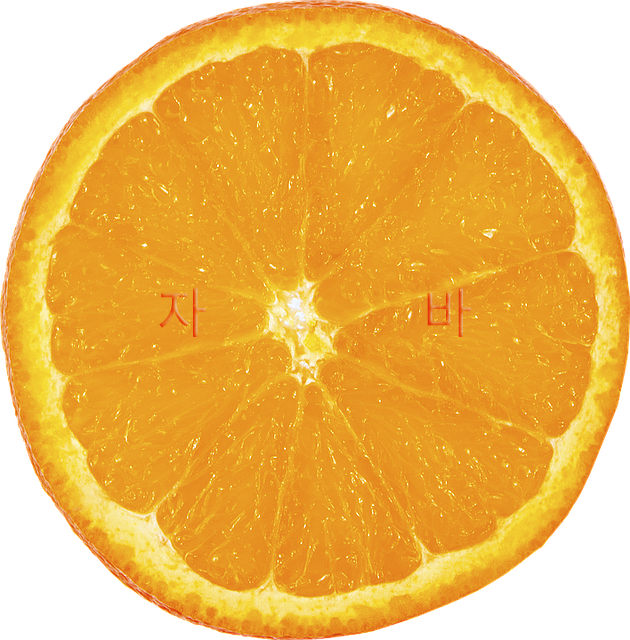
<style>
.page{position:relative;width:630px;height:640px;background:#ffffff}
.page>*{position:absolute;margin:0}
.t1{font:54px "NotoSansKR-Regular"}
</style>
<div class="page">
<p class="t1" style="left:159px;top:288px;width:313px;height:49px">자  바</p>
</div>
